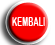
<style>
.page{position:relative;width:55px;height:45px;background:#f80000}
.page>*{position:absolute;margin:0}
.t1{font:12px "ArialRoundedMTBold";color:#fefeff;scale:0.61 1}
</style>
<div class="page">
<p class="t1" style="left:12px;top:17px;width:33px;height:9px">KEMBALI</p>
</div>
